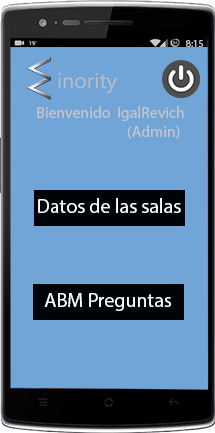
<style>
.page{position:relative;width:215px;height:433px;background:#71a4d7}
.page>*{position:absolute;margin:0}
.t1{font:10px "MyriadPro-Regular";color:#c4c5cb}
.t2{font:15.8px "MyriadPro-Regular";color:#c4c5cb}
.t3{font:20px "MyriadPro-Regular";color:#ffffff}
</style>
<div class="page">
<p class="t1" style="left:186px;top:40px;width:17px;height:7px">8:15</p>
<p class="t2" style="left:37px;top:106px;width:147px;height:33px;text-align:center">Bienvenido  IgalRevich<br>     (Admin)</p>
<p class="t3" style="left:38px;top:198px;width:143px;height:15px">Datos de las salas</p>
<p class="t3" style="left:44px;top:293px;width:127px;height:18px">ABM Preguntas</p>
</div>
